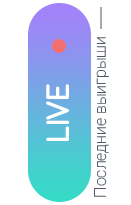
<style>
.page{position:relative;width:131px;height:205px;background:#ffffff}
.page>*{position:absolute;margin:0}
.t1{font:16px "Roboto-Thin";color:#4e5765}
.t2{font:32.5px "Arciform";color:#ffffff}
</style>
<div class="page">
<p class="t1" style="left:94px;top:37px;width:15px;height:160px;rotate:-90deg">Последние выигрыши</p>
<p class="t2" style="left:46px;top:84px;width:23px;height:57px;rotate:-90deg">LIVE</p>
</div>
